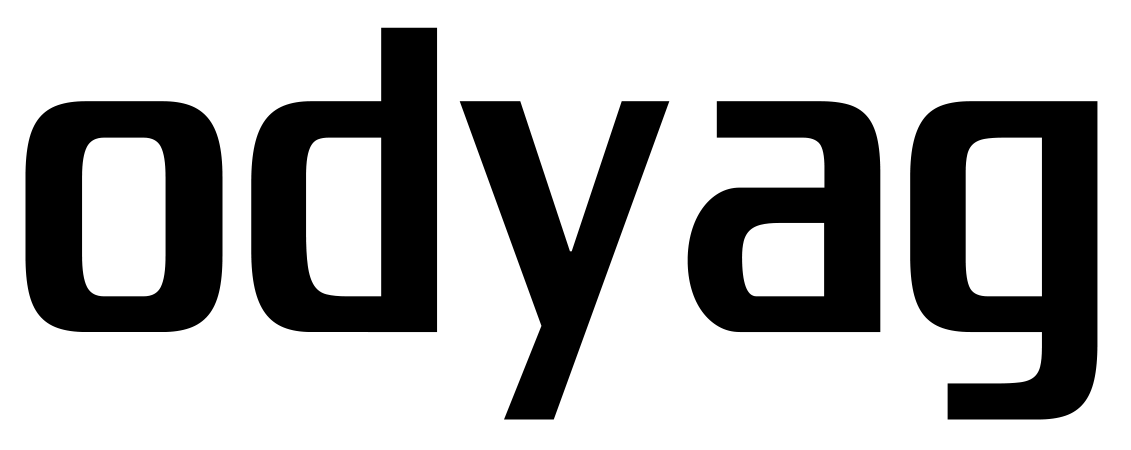
<style>
.page{position:relative;width:1131px;height:450px;background:#ffffff}
.page>*{position:absolute;margin:0}
.t1{font:360px "Unispace-Bold";color:#000000}
</style>
<div class="page">
<p class="t1" style="left:25px;top:27px;width:1073px;height:393px">odyag</p>
</div>
